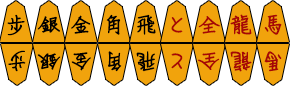
<style>
.page{position:relative;width:290px;height:86px;background:#f1a30c}
.page>*{position:absolute;margin:0}
.t1{font:25px "DFYa-W3-WINP-BF";color:#000000;font-weight:bold}
.t2{font:25px "DFYa-W3-WINP-BF";color:#a60606;font-weight:bold}
</style>
<div class="page">
<p class="t1" style="left:7px;top:14px;width:18px;height:22px">步</p>
<p class="t1" style="left:37px;top:16px;width:23px;height:17px">銀</p>
<p class="t1" style="left:71px;top:15px;width:20px;height:19px">金</p>
<p class="t1" style="left:106px;top:14px;width:15px;height:21px">角</p>
<p class="t1" style="left:137px;top:14px;width:19px;height:21px">飛</p>
<p class="t2" style="left:171px;top:17px;width:12px;height:16px">と</p>
<p class="t2" style="left:198px;top:16px;width:22px;height:18px">全</p>
<p class="t2" style="left:230px;top:14px;width:22px;height:21px">龍</p>
<p class="t2" style="left:264px;top:14px;width:18px;height:21px">馬</p>
<p class="t1" style="left:8px;top:50px;width:18px;height:22px;rotate:180deg">步</p>
<p class="t1" style="left:37px;top:53px;width:24px;height:17px;rotate:180deg">銀</p>
<p class="t1" style="left:71px;top:52px;width:20px;height:19px;rotate:180deg">金</p>
<p class="t1" style="left:108px;top:51px;width:14px;height:21px;rotate:180deg">角</p>
<p class="t1" style="left:136px;top:51px;width:19px;height:21px;rotate:180deg">飛</p>
<p class="t2" style="left:171px;top:53px;width:12px;height:16px;rotate:180deg">と</p>
<p class="t2" style="left:198px;top:52px;width:22px;height:18px;rotate:180deg">全</p>
<p class="t2" style="left:230px;top:51px;width:22px;height:21px;rotate:180deg">龍</p>
<p class="t2" style="left:264px;top:51px;width:18px;height:21px;rotate:180deg">馬</p>
</div>
